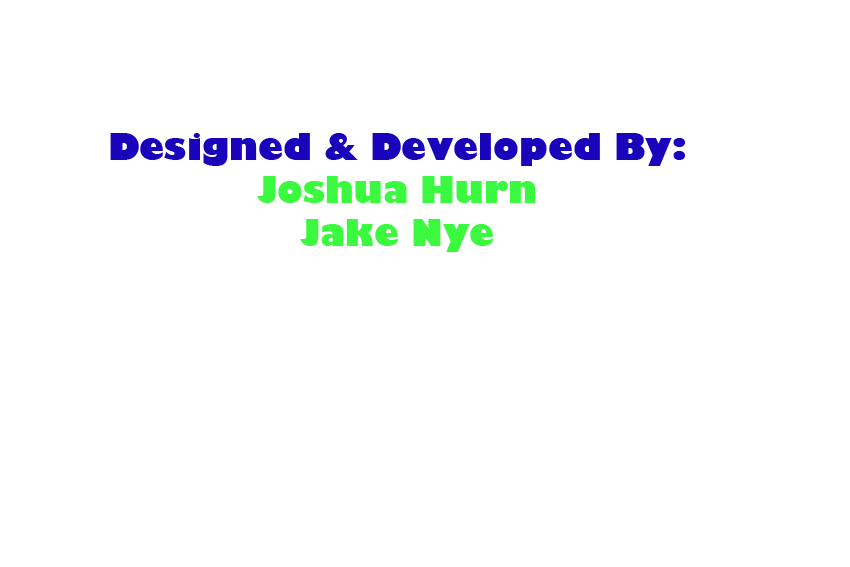
<style>
.page{position:relative;width:850px;height:567px;background:#ffffff}
.page>*{position:absolute;margin:0}
.t1{font:36px "GillSans-UltraBold";color:#1904bc}
.t2{font:36px "GillSans-UltraBold";color:#3af93e}
</style>
<div class="page">
<p class="t1" style="left:110px;top:133px;width:575px;height:119px;text-align:center">Designed &amp; Developed By:<br><span class="t2">Joshua Hurn<br>Jake Nye</span></p>
</div>
